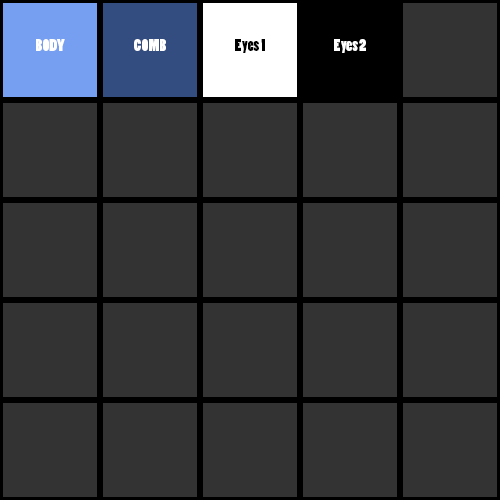
<style>
.page{position:relative;width:500px;height:500px;background:#333333}
.page>*{position:absolute;margin:0}
.t1{font:16px "PoplarStd";color:#ffffff}
.t2{font:16px "PoplarStd";color:#ff0000}
.t3{font:16px "PoplarStd";color:#000000}
</style>
<div class="page">
<p class="t1" style="left:36px;top:39px;width:29px;height:12px"><span class="t2"><br><br></span>BODY</p>
<p class="t1" style="left:134px;top:39px;width:32px;height:12px"><span class="t2"><br><br></span>COMB</p>
<p class="t3" style="left:235px;top:39px;width:30px;height:14px"><span class="t2"><br><br></span>Eyes 1</p>
<p class="t1" style="left:334px;top:39px;width:32px;height:14px"><span class="t3"><br><br></span>Eyes 2</p>
</div>
